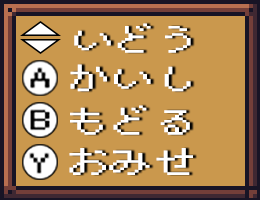
<style>
.page{position:relative;width:260px;height:200px;background:#ca984d}
.page>*{position:absolute;margin:0}
.t1{font:29px "PixelMplus12-Regular";color:#ffffff;scale:1.5 1}
</style>
<div class="page">
<p class="t1" style="left:74px;top:23px;width:117px;height:30px">いどう</p>
<p class="t1" style="left:70px;top:64px;width:121px;height:28px">かいし</p>
<p class="t1" style="left:70px;top:105px;width:120px;height:30px">もどる</p>
<p class="t1" style="left:69px;top:148px;width:124px;height:27px">おみせ</p>
</div>
